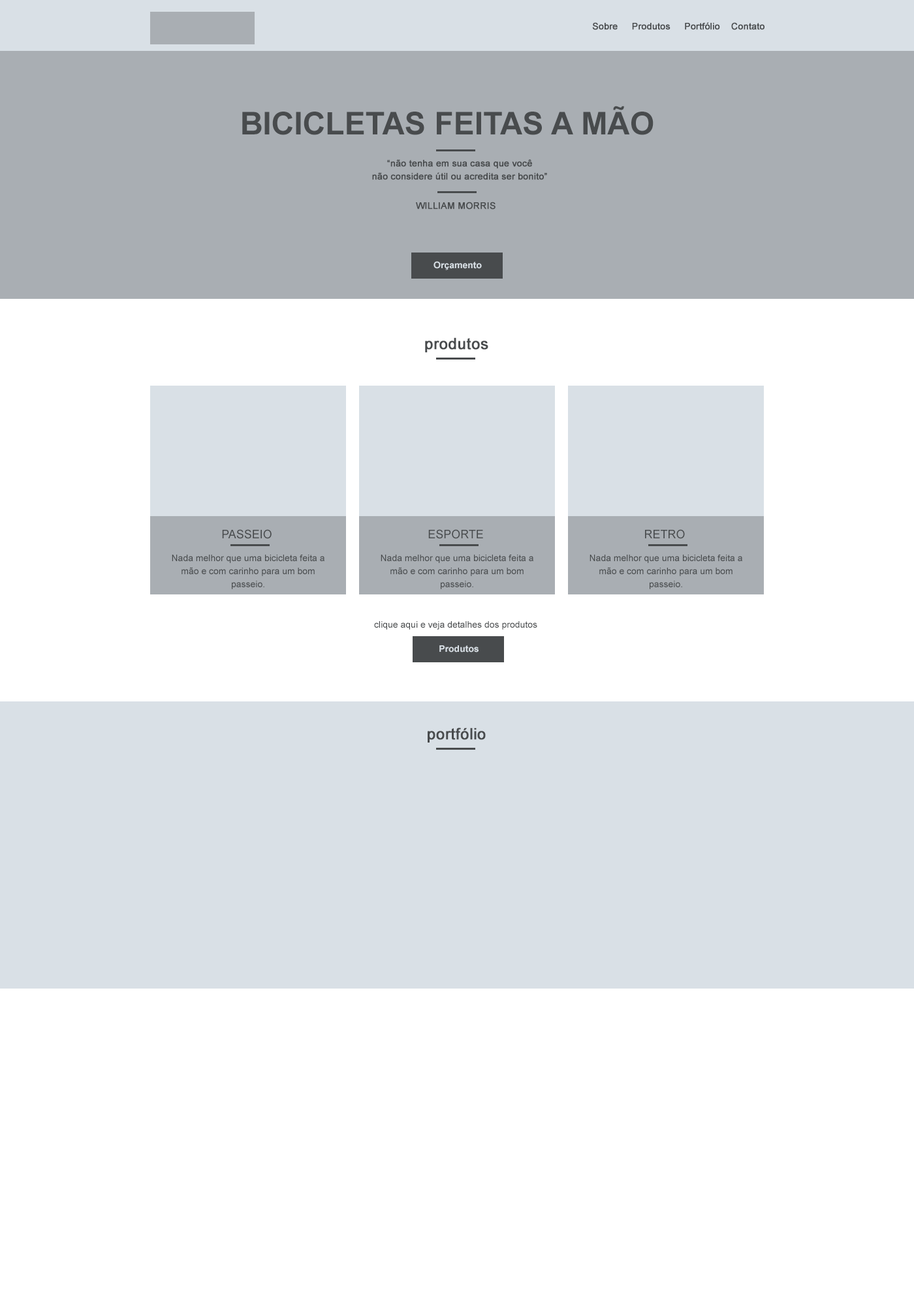
<style>
.page{position:relative;width:914px;height:1305px;background:#ffffff}
.page>*{position:absolute;margin:0}
.t1{font:9.1px "ArialMT";color:#484b4d;font-weight:bold}
.t2{font:31.3px "Arial-BoldMT";color:#484b4d;text-transform:uppercase}
.t3{font:9.1px/13.1px "ArialMT";color:#484b4d;font-weight:bold}
.t4{font:9.1px "ArialMT";color:#484b4d;text-transform:uppercase;font-weight:bold}
.t5{font:9.1px "Arial-BoldMT";color:#d9e0e6}
.t6{font:15.7px "ArialMT";color:#484b4d;font-weight:bold}
.t7{font:11.7px "ArialMT";color:#484b4d;text-transform:uppercase}
.t8{font:9.1px/13.1px "ArialMT";color:#484b4d}
.t9{font:9.1px "ArialMT";color:#484b4d}
</style>
<div class="page">
<p class="t1" style="left:592px;top:22px;width:172px;height:8px">Sobre     Produtos     Portfólio    Contato</p>
<p class="t2" style="left:242px;top:106px;width:411px;height:29px">Bicicletas Feitas a Mão</p>
<p class="t3" style="left:372px;top:159px;width:175px;height:21px;text-align:center">“não tenha em sua casa que você<br>não considere útil ou acredita ser bonito”</p>
<p class="t4" style="left:416px;top:202px;width:79px;height:7px">William Morris</p>
<p class="t5" style="left:433px;top:261px;width:49px;height:9px">Orçamento</p>
<p class="t6" style="left:425px;top:337px;width:63px;height:15px">produtos</p>
<p class="t7" style="left:222px;top:529px;width:49px;height:10px">Passeio</p>
<p class="t7" style="left:428px;top:529px;width:55px;height:10px">esporte</p>
<p class="t7" style="left:645px;top:529px;width:40px;height:10px">retro</p>
<p class="t8" style="left:172px;top:555px;width:152px;height:34px;text-align:center">Nada melhor que uma bicicleta feita a mão e com carinho para um bom passeio.</p>
<p class="t8" style="left:380px;top:555px;width:153px;height:34px;text-align:center">Nada melhor que uma bicicleta feita a mão e com carinho para um bom passeio.</p>
<p class="t8" style="left:589px;top:555px;width:153px;height:34px;text-align:center">Nada melhor que uma bicicleta feita a mão e com carinho para um bom passeio.</p>
<p class="t9" style="left:374px;top:621px;width:163px;height:9px">clique aqui e veja detalhes dos produtos</p>
<p class="t5" style="left:439px;top:645px;width:39px;height:8px">Produtos</p>
<p class="t6" style="left:427px;top:728px;width:59px;height:15px">portfólio</p>
</div>
